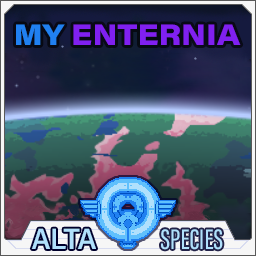
<style>
.page{position:relative;width:256px;height:256px}
.page>*{position:absolute;margin:0}
.t1{font:29.2px "AcuminConcept_760.000wght_112.000wdth";color:#8020f0}
.t2{font:29.2px "AcuminConcept_760.000wght_112.000wdth";color:#2080f0}
.t3{font:29.2px "AcuminConcept_589.000wght_96.000wdth";color:#b0e0fc}
.t4{font:29.2px "AcuminConcept_512.000wght_51.000wdth";color:#b0e0fc}
</style>
<div class="page">
<p class="t1" style="left:16px;top:24px;width:225px;height:21px"><span class="t2">MY </span>ENTERNIA</p>
<p class="t3" style="left:31px;top:228px;width:65px;height:21px">ALTA</p>
<p class="t4" style="left:161px;top:229px;width:62px;height:21px">SPECIES</p>
</div>
